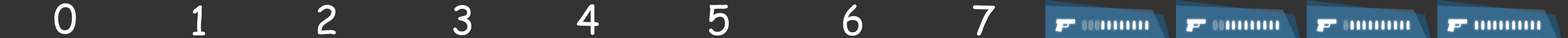
<style>
.page{position:relative;width:1568px;height:38px;background:#333333}
.page>*{position:absolute;margin:0}
.t1{font:39.2px "ComicSansMS";color:#ffffff}
</style>
<div class="page">
<p class="t1" style="left:54px;top:3px;width:22px;height:31px">0</p>
<p class="t1" style="left:193px;top:5px;width:12px;height:30px">1</p>
<p class="t1" style="left:318px;top:5px;width:18px;height:29px">2</p>
<p class="t1" style="left:453px;top:5px;width:18px;height:30px">3</p>
<p class="t1" style="left:577px;top:4px;width:22px;height:31px">4</p>
<p class="t1" style="left:709px;top:4px;width:20px;height:32px">5</p>
<p class="t1" style="left:843px;top:4px;width:19px;height:32px">6</p>
<p class="t1" style="left:973px;top:5px;width:22px;height:31px">7</p>
</div>
